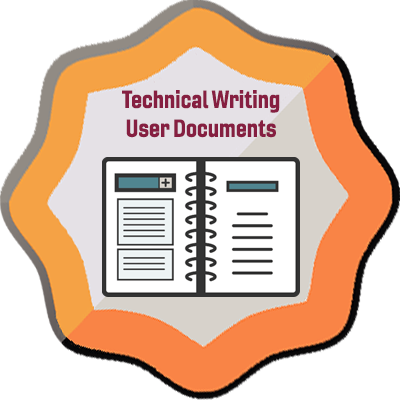
<style>
.page{position:relative;width:400px;height:400px;background:#ffffff}
.page>*{position:absolute;margin:0}
.t1{font:24px "Gineso-ConBol";color:#861f41}
</style>
<div class="page">
<p class="t1" style="left:122px;top:90px;width:158px;height:48px;text-align:center">Technical Writing<br>User Documents</p>
</div>
